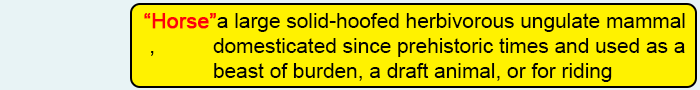
<style>
.page{position:relative;width:700px;height:90px;background:#fff200}
.page>*{position:absolute;margin:0}
.t1{font:20.8px "ArialMT";color:#020202}
.t2{font:20.8px "ArialMT";color:#fd010d;font-weight:bold}
</style>
<div class="page">
<p class="t1" style="left:144px;top:13px;width:541px;height:69px"><span class="t2">“Horse”</span>a large solid-hoofed herbivorous ungulate mammal<br> ,          domesticated since prehistoric times and used as a <br>            beast of burden, a draft animal, or for riding</p>
</div>
